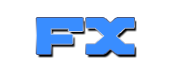
<style>
.page{position:relative;width:171px;height:72px;background:#ffffff}
.page>*{position:absolute;margin:0}
.t1{font:54.1px "Skyhawk";color:#398dff}
</style>
<div class="page">
<p class="t1" style="left:36px;top:18px;width:98px;height:36px">FX</p>
</div>
